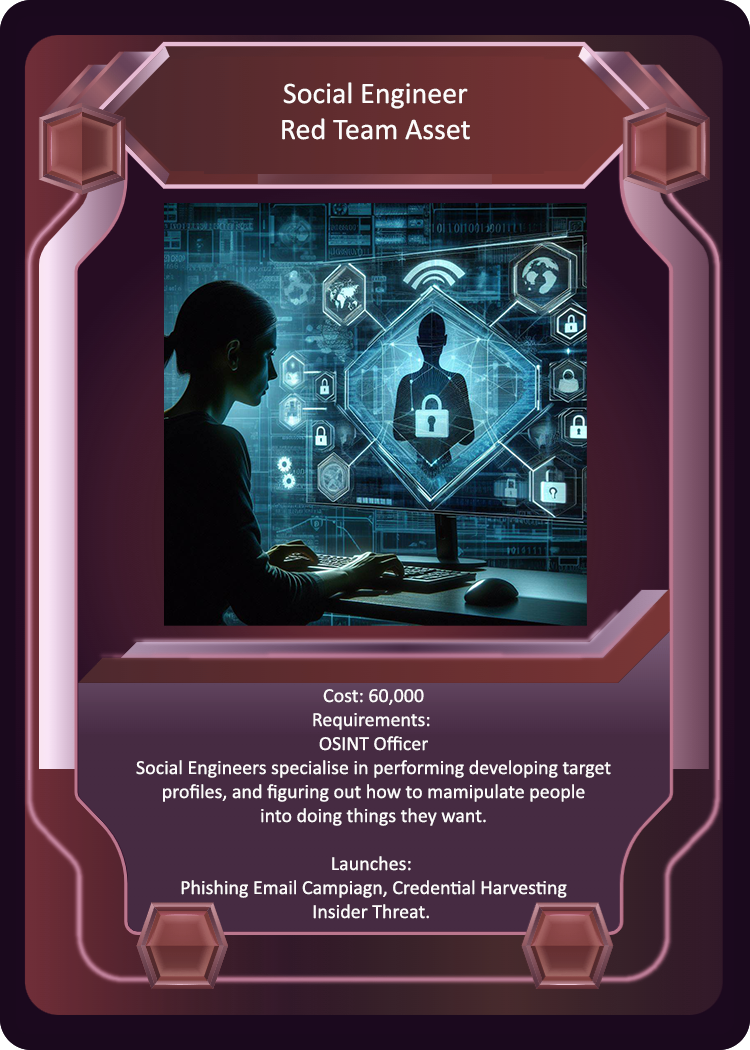
<style>
.page{position:relative;width:750px;height:1050px}
.page>*{position:absolute;margin:0}
.t1{font:30px "Calibri";color:#fcfbfb}
.t2{font:20px "Calibri";color:#fcfbfb}
</style>
<div class="page">
<p class="t1" style="left:282px;top:82px;width:188px;height:58px;text-align:center">Social Engineer<br>Red Team Asset</p>
<p class="t2" style="left:136px;top:689px;width:475px;height:230px;text-align:center">Cost: 60,000<br>Requirements: <br>OSINT Officer<br>Social Engineers specialise in performing developing target<br>profiles, and figuring out how to mamipulate people<br>into doing things they want.<br><br>Launches: <br>Phishing Email Campiagn, Credential Harvesting<br>Insider Threat.</p>
</div>
